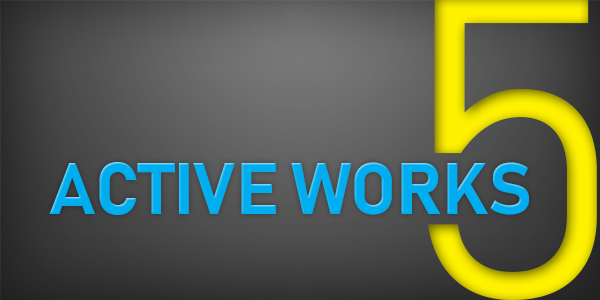
<style>
.page{position:relative;width:600px;height:300px}
.page>*{position:absolute;margin:0}
.t1{font:71.7px "Bahnschrift-Bold";color:#00aeef;text-transform:uppercase}
</style>
<div class="page">
<p class="t1" style="left:49px;top:162px;width:480px;height:53px">Active Works</p>
</div>
